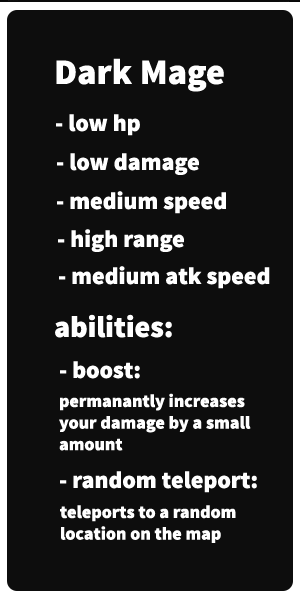
<style>
.page{position:relative;width:300px;height:600px;background:#0d0d0d}
.page>*{position:absolute;margin:0}
.t1{font:36px "SourceSansPro-Black";color:#ffffff}
.t2{font:24px "SourceSansPro-Black";color:#ffffff}
.t3{font:30px "SourceSansPro-Black";color:#ffffff}
.t4{font:18px "SourceSansPro-Black"}
</style>
<div class="page">
<p class="t1" style="left:56px;top:56px;width:168px;height:34px">Dark Mage</p>
<p class="t2" style="left:56px;top:112px;width:84px;height:22px">low hp -</p>
<p class="t2" style="left:57px;top:151px;width:142px;height:22px">low damage -</p>
<p class="t2" style="left:57px;top:189px;width:169px;height:23px">medium speed -</p>
<p class="t2" style="left:58px;top:227px;width:126px;height:23px">high range -</p>
<p class="t2" style="left:59px;top:264px;width:211px;height:23px">medium atk speed -</p>
<p class="t3" style="left:55px;top:312px;width:117px;height:24px">:abilities</p>
<p class="t2" style="left:60px;top:359px;width:80px;height:18px">:boost -</p>
<p class="t4" style="left:59px;top:391px;width:192px;height:58px;text-align:right">permanantly increases<br>your damage by a small<br>amount</p>
<p class="t2" style="left:60px;top:469px;width:197px;height:22px">:random teleport -</p>
<p class="t4" style="left:60px;top:503px;width:176px;height:38px;text-align:right">teleports to a random<br>location on the map</p>
</div>
